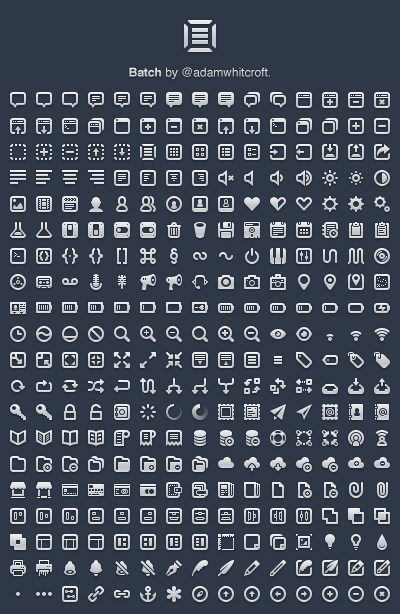
<style>
.page{position:relative;width:400px;height:614px;background:#2e3846}
.page>*{position:absolute;margin:0}
.t1{font:12px "Helvetica"}
.t2{font:12px "Helvetica-Bold"}
</style>
<div class="page">
<p class="t1" style="left:129px;top:67px;width:141px;height:12px"><span class="t2">Batch</span> by @adamwhitcroft.</p>
</div>
